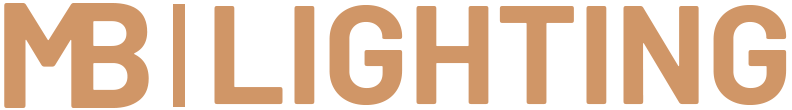
<style>
.page{position:relative;width:792px;height:110px;background:#ffffff}
.page>*{position:absolute;margin:0}
.t1{font:150px "Barlow-Bold";color:#d09667}
.t2{font:140px "Barlow-Bold";color:#d09667}
</style>
<div class="page">
<p class="t1" style="left:4px;top:3px;width:89px;height:105px">M</p>
<p class="t1" style="left:72px;top:3px;width:77px;height:105px">B</p>
<p class="t2" style="left:214px;top:5px;width:573px;height:100px">LIGHTING</p>
</div>
